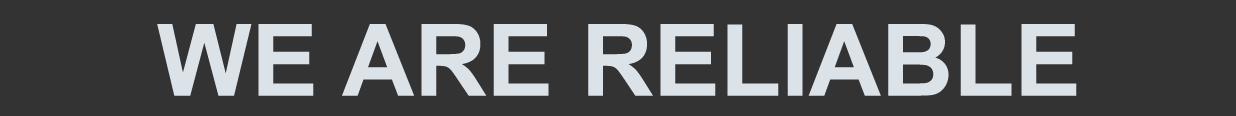
<style>
.page{position:relative;width:1236px;height:116px;background:#333333}
.page>*{position:absolute;margin:0}
.t1{font:100px "Arial-BoldMT";color:#dbe3e9}
</style>
<div class="page">
<p class="t1" style="left:157px;top:24px;width:920px;height:72px">WE ARE RELIABLE</p>
</div>
